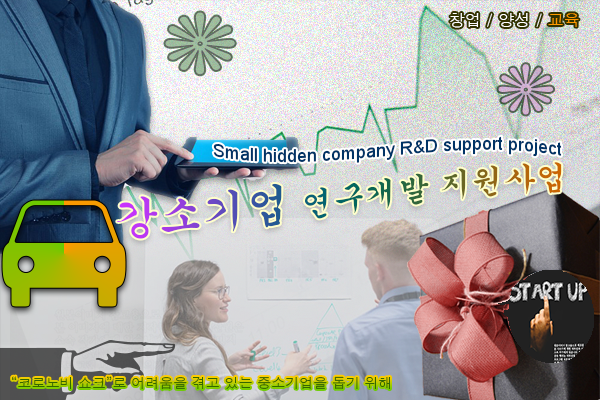
<style>
.page{position:relative;width:600px;height:400px}
.page>*{position:absolute;margin:0}
.t1{font:16px "Dotum";color:#ffffff}
.t2{font:16px "Dotum";color:#ff9900}
.t3{font:18px "ArialMT";color:#003366}
.t4{font:32px "Gungsuh"}
.t5{font:44px "Gungsuh"}
.t6{font:14px "Dotum";color:#336600}
</style>
<div class="page">
<p class="t1" style="left:450px;top:13px;width:129px;height:15px">창업 / 양성 / <span class="t2">교육</span></p>
<p class="t3" style="left:213px;top:136px;width:349px;height:27px">Small hidden company R&amp;D support project</p>
<p class="t4" style="left:117px;top:162px;width:445px;height:77px"><span class="t5">강소기업</span> 연구개발 지원사업</p>
<p class="t6" style="left:12px;top:376px;width:379px;height:14px">“코로노비 쇼크”로 어려움을 겪고 있는 중소기업을 돕기 위해</p>
</div>
